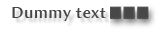
<style>
.page{position:relative;width:164px;height:32px;background:#ffffff}
.page>*{position:absolute;margin:0}
.t1{font:16px "AmiraParadiso";letter-spacing:0.05em;color:#474747}
</style>
<div class="page">
<p class="t1" style="left:12px;top:7px;width:94px;height:14px">Dummy text</p>
</div>
